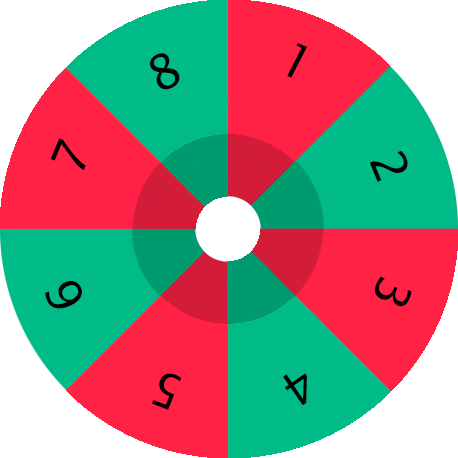
<style>
.page{position:relative;width:458px;height:458px;background:#ff2244}
.page>*{position:absolute;margin:0}
.t1{font:48px "LucidaSansUnicode";color:#000000}
</style>
<div class="page">
<p class="t1" style="left:150px;top:53px;width:30px;height:37px;rotate:-27deg">8</p>
<p class="t1" style="left:287px;top:43px;width:20px;height:35px;rotate:27deg">1</p>
<p class="t1" style="left:50px;top:138px;width:36px;height:33px;rotate:-68deg">7</p>
<p class="t1" style="left:369px;top:151px;width:39px;height:31px;rotate:68deg">2</p>
<p class="t1" style="left:45px;top:281px;width:37px;height:28px;rotate:-114deg">6</p>
<p class="t1" style="left:375px;top:276px;width:37px;height:31px;rotate:115deg">3</p>
<p class="t1" style="left:152px;top:373px;width:30px;height:37px;rotate:-159deg">5</p>
<p class="t1" style="left:283px;top:373px;width:24px;height:33px;rotate:145deg">4</p>
</div>
